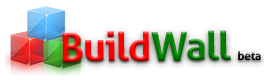
<style>
.page{position:relative;width:264px;height:80px;background:#ffffff}
.page>*{position:absolute;margin:0}
.t1{font:40px "Aller-Bold";letter-spacing:-0.025em;color:#ff0000}
.t2{font:40px "Aller-Bold";letter-spacing:-0.025em;color:#008000}
.t3{font:12px "Aller-Bold";letter-spacing:-0.025em;color:#000000}
</style>
<div class="page">
<p class="t1" style="left:62px;top:30px;width:199px;height:33px;rotate:-1deg">Build<span class="t2">Wall </span><span class="t3">beta</span></p>
</div>
